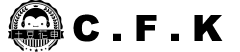
<style>
.page{position:relative;width:240px;height:52px;background:#ffffff}
.page>*{position:absolute;margin:0}
.t1{font:36.1px "Arial-Black";letter-spacing:0.3em;color:#000000}
</style>
<div class="page">
<p class="t1" style="left:73px;top:14px;width:150px;height:28px">C.F.K</p>
</div>
